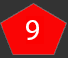
<style>
.page{position:relative;width:68px;height:58px;background:#fa0505}
.page>*{position:absolute;margin:0}
.t1{font:30px "MyriadPro-Regular";color:#ffffff}
</style>
<div class="page">
<p class="t1" style="left:26px;top:20px;width:13px;height:20px">9</p>
</div>
